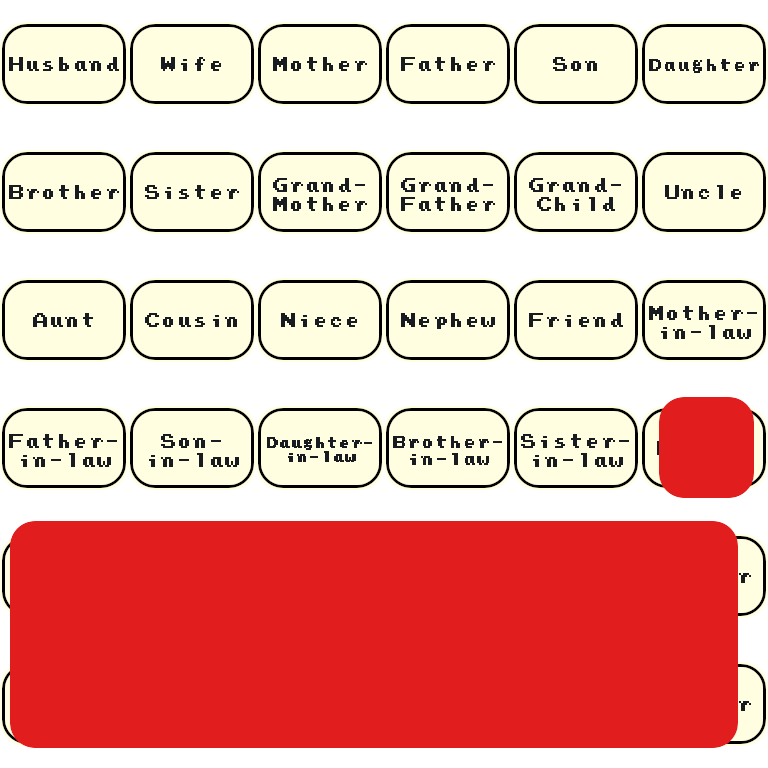
<style>
.page{position:relative;width:768px;height:768px;background:#fffee0}
.page>*{position:absolute;margin:0}
.t1{font:16px "PressStartReg";color:#181b1f}
.t2{font:14px "PressStartReg";color:#181b1f}
.t3{font:12px "PressStartReg";color:#181b1f}
</style>
<div class="page">
<p class="t1" style="left:9px;top:57px;width:110px;height:14px">Husband</p>
<p class="t1" style="left:161px;top:57px;width:60px;height:14px">Wife</p>
<p class="t1" style="left:273px;top:57px;width:94px;height:14px">Mother</p>
<p class="t1" style="left:401px;top:57px;width:94px;height:14px">Father</p>
<p class="t1" style="left:553px;top:57px;width:44px;height:14px">Son</p>
<p class="t2" style="left:649px;top:59px;width:110px;height:14px">Daughter</p>
<p class="t1" style="left:9px;top:185px;width:110px;height:14px">Brother</p>
<p class="t1" style="left:145px;top:185px;width:94px;height:14px">Sister</p>
<p class="t1" style="left:273px;top:178px;width:94px;height:33px;text-align:center">Grand-<br>Mother</p>
<p class="t1" style="left:401px;top:178px;width:94px;height:33px;text-align:center">Grand-<br>Father</p>
<p class="t1" style="left:529px;top:178px;width:92px;height:33px;text-align:center">Grand-<br>Child</p>
<p class="t1" style="left:665px;top:185px;width:76px;height:14px">Uncle</p>
<p class="t1" style="left:33px;top:313px;width:60px;height:14px">Aunt</p>
<p class="t1" style="left:145px;top:313px;width:92px;height:14px">Cousin</p>
<p class="t1" style="left:281px;top:313px;width:76px;height:14px">Niece</p>
<p class="t1" style="left:401px;top:313px;width:94px;height:16px">Nephew</p>
<p class="t1" style="left:529px;top:313px;width:94px;height:14px">Friend</p>
<p class="t1" style="left:649px;top:306px;width:108px;height:33px;text-align:center">Mother-<br>in-law</p>
<p class="t1" style="left:9px;top:434px;width:108px;height:33px;text-align:center">Father-<br>in-law</p>
<p class="t1" style="left:149px;top:434px;width:90px;height:33px;text-align:center">Son-<br>in-law</p>
<p class="t3" style="left:267px;top:437px;width:105px;height:25px;text-align:center">Daughter-<br>in-law</p>
<p class="t2" style="left:393px;top:436px;width:109px;height:29px;text-align:center">Brother-<br>in-law</p>
<p class="t1" style="left:521px;top:434px;width:108px;height:33px;text-align:center">Sister-<br>in-law</p>
</div>
